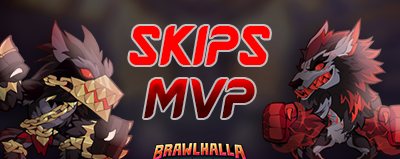
<style>
.page{position:relative;width:400px;height:159px}
.page>*{position:absolute;margin:0}
.t1{font:79.6px/53.1px "Averus";text-transform:uppercase}
</style>
<div class="page">
<p class="t1" style="left:129px;top:26px;width:141px;height:92px;text-align:center">Skips<br>MVP</p>
</div>
